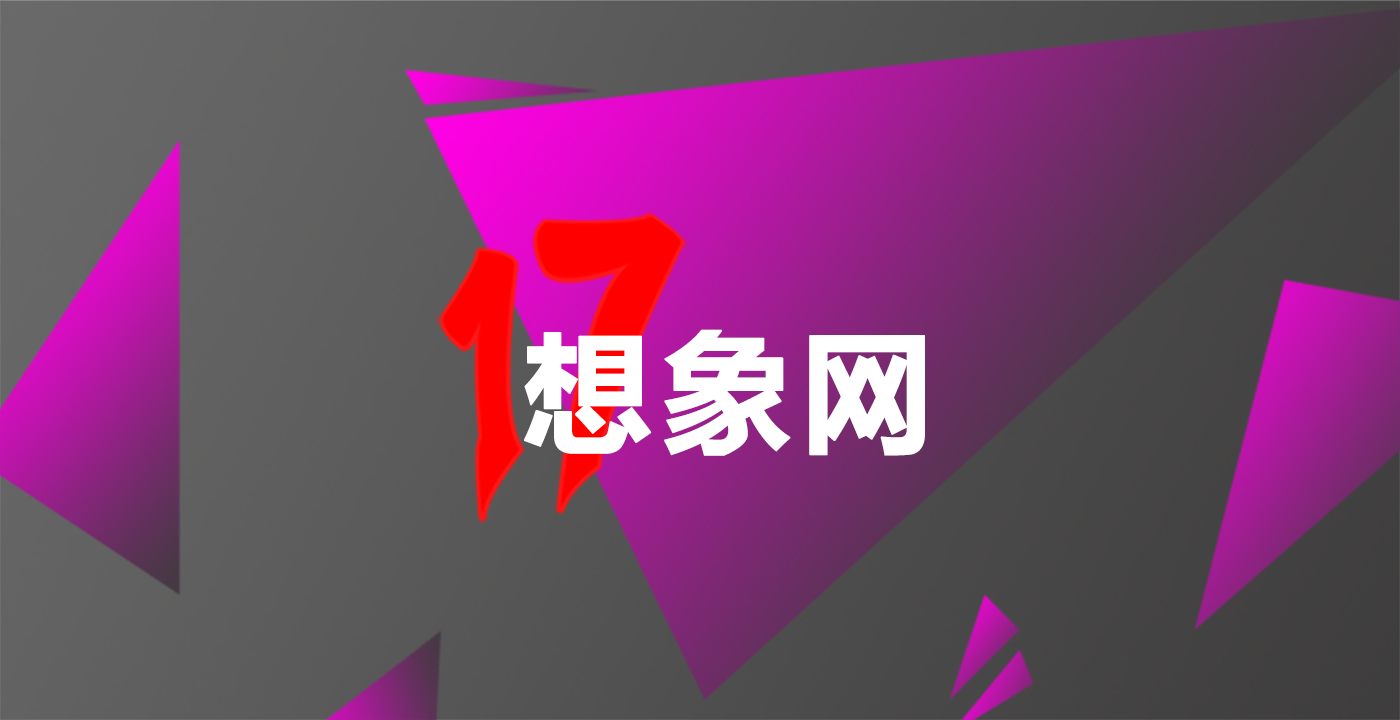
<style>
.page{position:relative;width:1400px;height:720px}
.page>*{position:absolute;margin:0}
.t1{font:129.2px "MicrosoftYaHei-Bold";letter-spacing:0.06em;color:#ffffff;font-weight:bold}
</style>
<div class="page">
<p class="t1" style="left:524px;top:329px;width:401px;height:127px">想象网</p>
</div>
